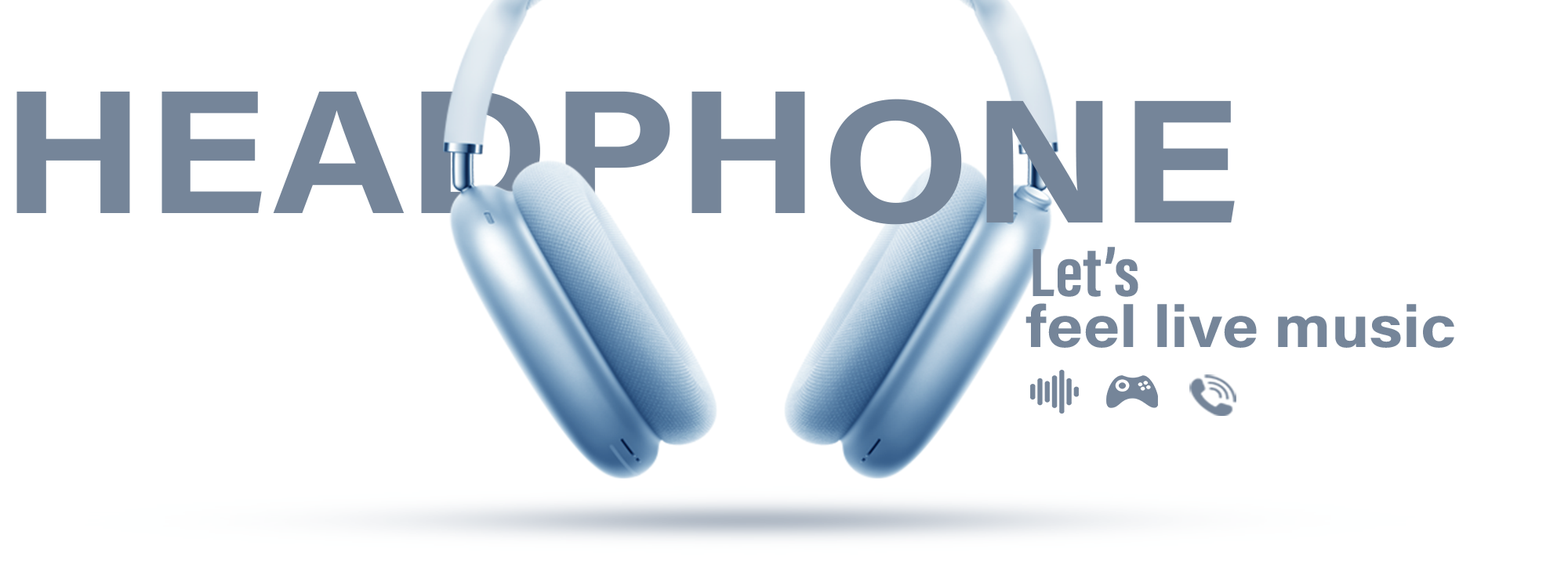
<style>
.page{position:relative;width:1568px;height:564px;background:#ffffff}
.page>*{position:absolute;margin:0}
.t1{font:176.4px "AcuminConcept-Bold";color:#758599;scale:1.11 1}
.t2{font:70.6px "AcuminConcept-ExtraCondensedBold";color:#758599;scale:1.11 1}
.t3{font:58.8px "AcuminConcept-Bold";color:#758599;scale:1.11 1}
</style>
<div class="page">
<p class="t1" style="left:16px;top:91px;width:789px;height:122px">HEADPH</p>
<p class="t1" style="left:830px;top:99px;width:405px;height:126px">ONE</p>
<p class="t2" style="left:1033px;top:247px;width:105px;height:50px">Let’s</p>
<p class="t3" style="left:1025px;top:303px;width:429px;height:45px">feel live music</p>
</div>
